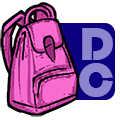
<style>
.page{position:relative;width:120px;height:120px;background:#ffffff}
.page>*{position:absolute;margin:0}
.t1{font:48px/36px "Bauhaus93";color:#8d86cf}
</style>
<div class="page">
<p class="t1" style="left:79px;top:28px;width:34px;height:69px;text-align:right">D<br>C</p>
</div>
